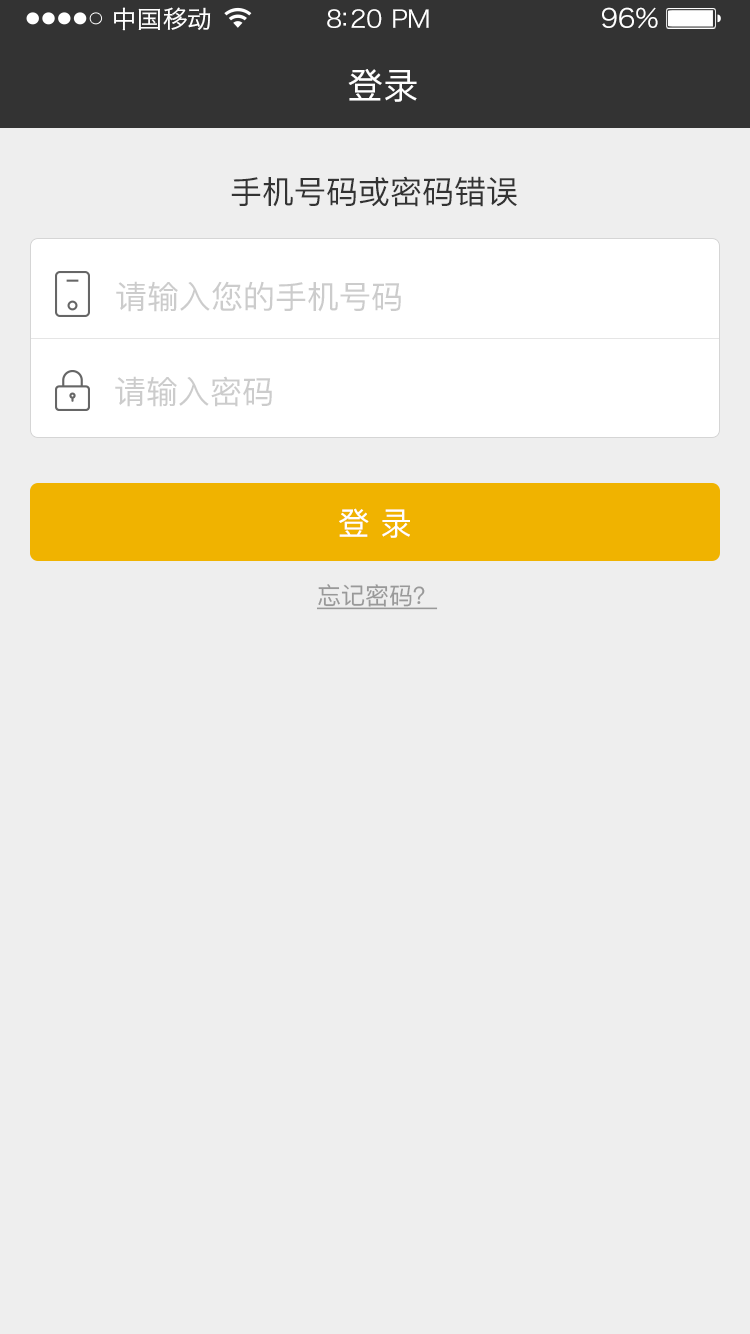
<style>
.page{position:relative;width:750px;height:1334px;background:#eeeeee}
.page>*{position:absolute;margin:0}
.t1{font:24px "HiraginoSansGB-W3";letter-spacing:0.02em;color:#ffffff;scale:1.03 1}
.t2{font:24px "HiraginoSansGB-W3";letter-spacing:-0.02em;color:#ffffff;scale:1.03 1}
.t3{font:26.2px "HiraginoSansGB-W3";letter-spacing:-0.02em;color:#ffffff;scale:1.03 1}
.t4{font:36px "PingFang-SC-Medium";letter-spacing:-0.02em;color:#ffffff}
.t5{font:32px "PingFang-SC-Medium";color:#333333}
.t6{font:32px "PingFang-SC-Medium";color:#cccccc}
.t7{font:32px "PingFang-SC-Medium";color:#ffffff}
.t8{font:24px "PingFang-SC-Medium";color:#999999;text-decoration:underline}
</style>
<div class="page">
<p class="t1" style="left:114px;top:7px;width:97px;height:24px">中国移动</p>
<p class="t2" style="left:327px;top:9px;width:102px;height:19px">8:20 PM</p>
<p class="t3" style="left:602px;top:7px;width:56px;height:22px">96%</p>
<p class="t4" style="left:348px;top:69px;width:69px;height:33px">登录</p>
<p class="t5" style="left:231px;top:176px;width:286px;height:31px">手机号码或密码错误</p>
<p class="t6" style="left:116px;top:281px;width:285px;height:31px">请输入您的手机号码</p>
<p class="t6" style="left:115px;top:376px;width:157px;height:31px">请输入密码</p>
<p class="t7" style="left:339px;top:508px;width:71px;height:30px">登 录</p>
<p class="t8" style="left:317px;top:584px;width:121px;height:26px">忘记密码？</p>
</div>
